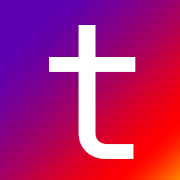
<style>
.page{position:relative;width:180px;height:180px}
.page>*{position:absolute;margin:0}
.t1{font:185px "JetBrainsMono-Regular";color:#ffffff}
</style>
<div class="page">
<p class="t1" style="left:49px;top:25px;width:87px;height:134px">t</p>
</div>
